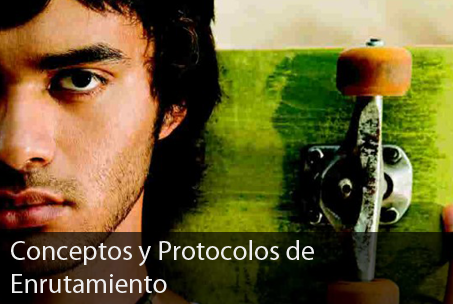
<style>
.page{position:relative;width:453px;height:304px}
.page>*{position:absolute;margin:0}
.t1{font:27.4px "MyriadPro-Regular";color:#eeeeee}
</style>
<div class="page">
<p class="t1" style="left:11px;top:240px;width:303px;height:53px">Conceptos y Protocolos de<br>Enrutamiento</p>
</div>
